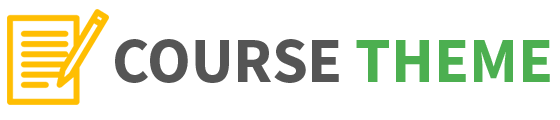
<style>
.page{position:relative;width:560px;height:120px;background:#ffffff}
.page>*{position:absolute;margin:0}
.t1{font:64px "SourceSansPro-Bold";color:#555555}
.t2{font:64px "SourceSansPro-Bold";color:#4caf50}
</style>
<div class="page">
<p class="t1" style="left:115px;top:39px;width:435px;height:44px">COURSE <span class="t2">THEME</span></p>
</div>
